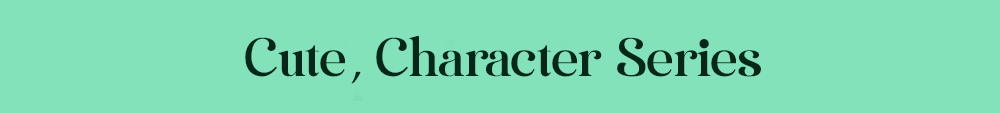
<style>
.page{position:relative;width:1000px;height:113px;background:#83e2ba}
.page>*{position:absolute;margin:0}
.t1{font:54.2px "CalminglyPersonalUse";color:#052819}
.t2{font:54.2px "Playball-Regular";color:#052819}
</style>
<div class="page">
<p class="t1" style="left:245px;top:35px;width:516px;height:49px">Cute<span class="t2">,</span> Character Series</p>
</div>
